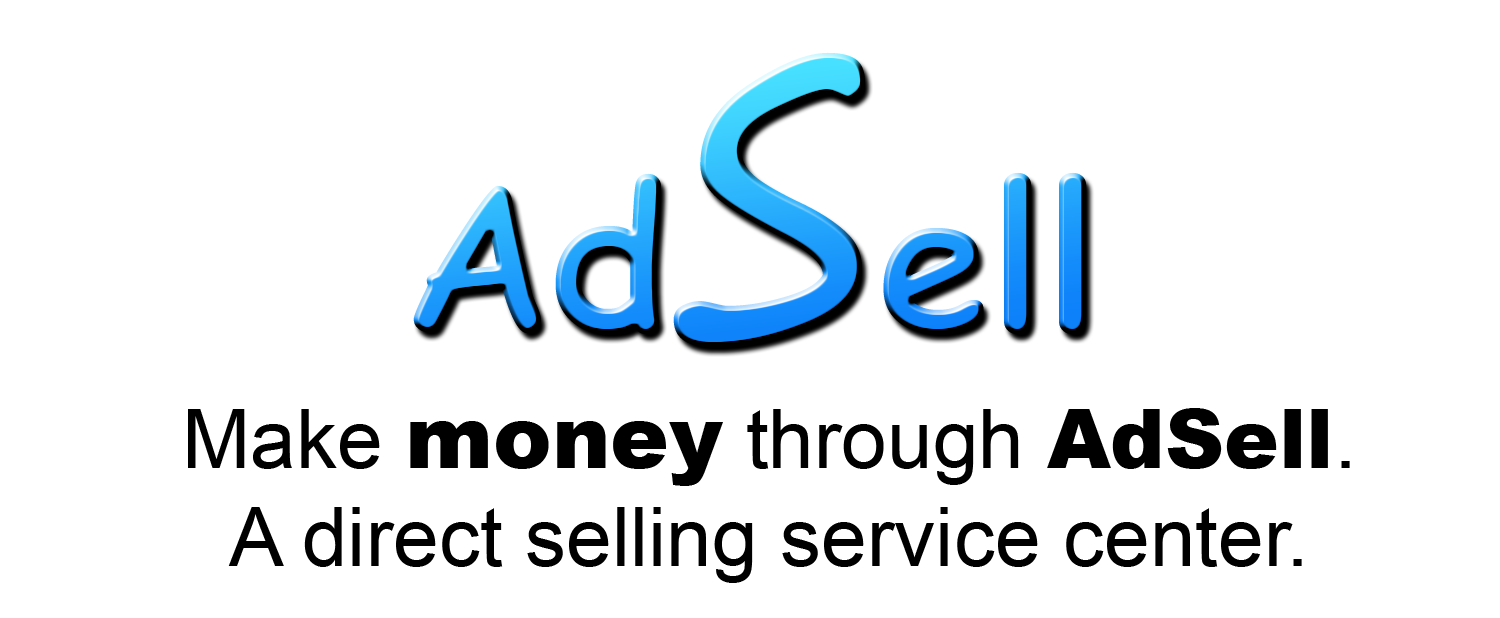
<style>
.page{position:relative;width:1500px;height:618px;background:#ffffff}
.page>*{position:absolute;margin:0}
.t1{font:200px "ComicSansMS-Bold"}
.t2{font:496px "SegoePrint"}
.t3{font:82px "ArialMT";color:#000000}
.t4{font:88px "Arial-Black";color:#000000}
.t5{font:82px "Arial-Black";color:#000000}
</style>
<div class="page">
<p class="t1" style="left:413px;top:52px;width:674px;height:295px">Ad<span class="t2">s</span>ell</p>
<p class="t3" style="left:188px;top:408px;width:1162px;height:175px;text-align:center">Make <span class="t4">money</span> through <span class="t5">AdSell</span>.<br>A direct selling service center.</p>
</div>
